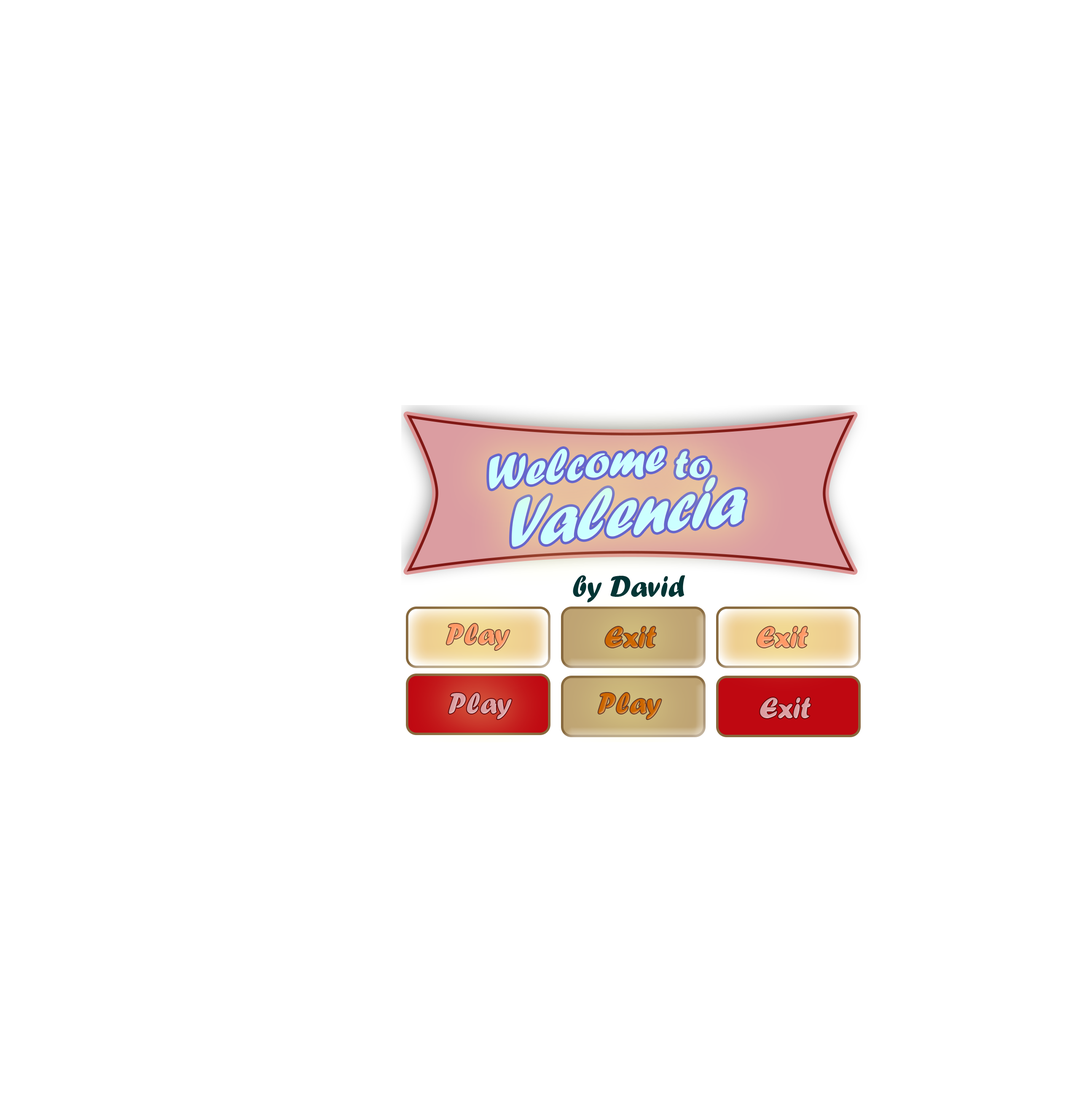
<style>
.page{position:relative;width:1079px;height:1106px;background:#ffffff}
.page>*{position:absolute;margin:0}
.t1{font:48.2px "ForteMT";color:#ccffff}
.t2{font:40.4px "ForteMT";color:#ccffff}
.t3{font:76px "ForteMT";color:#ccffff;scale:0.86 1}
.t4{font:30.3px "ForteMT";color:#003333}
.t5{font:30.3px "ForteMT";color:#ff9966}
.t6{font:30.3px "ForteMT";color:#cc6600}
.t7{font:30.3px "ForteMT";color:#db9ea1}
</style>
<div class="page">
<p class="t1" style="left:489px;top:447px;width:176px;height:42px;rotate:-6deg">Welcome</p>
<p class="t2" style="left:675px;top:451px;width:35px;height:27px;rotate:-1deg">to</p>
<p class="t3" style="left:511px;top:477px;width:234px;height:70px;rotate:-6deg">Valencia</p>
<p class="t4" style="left:573px;top:575px;width:112px;height:27px">by David</p>
<p class="t5" style="left:446px;top:624px;width:63px;height:26px">Play</p>
<p class="t6" style="left:605px;top:627px;width:51px;height:20px">Exit</p>
<p class="t5" style="left:757px;top:627px;width:51px;height:20px">Exit</p>
<p class="t7" style="left:448px;top:693px;width:63px;height:26px">Play</p>
<p class="t6" style="left:598px;top:693px;width:63px;height:26px">Play</p>
<p class="t7" style="left:760px;top:697px;width:51px;height:21px">Exit</p>
</div>
